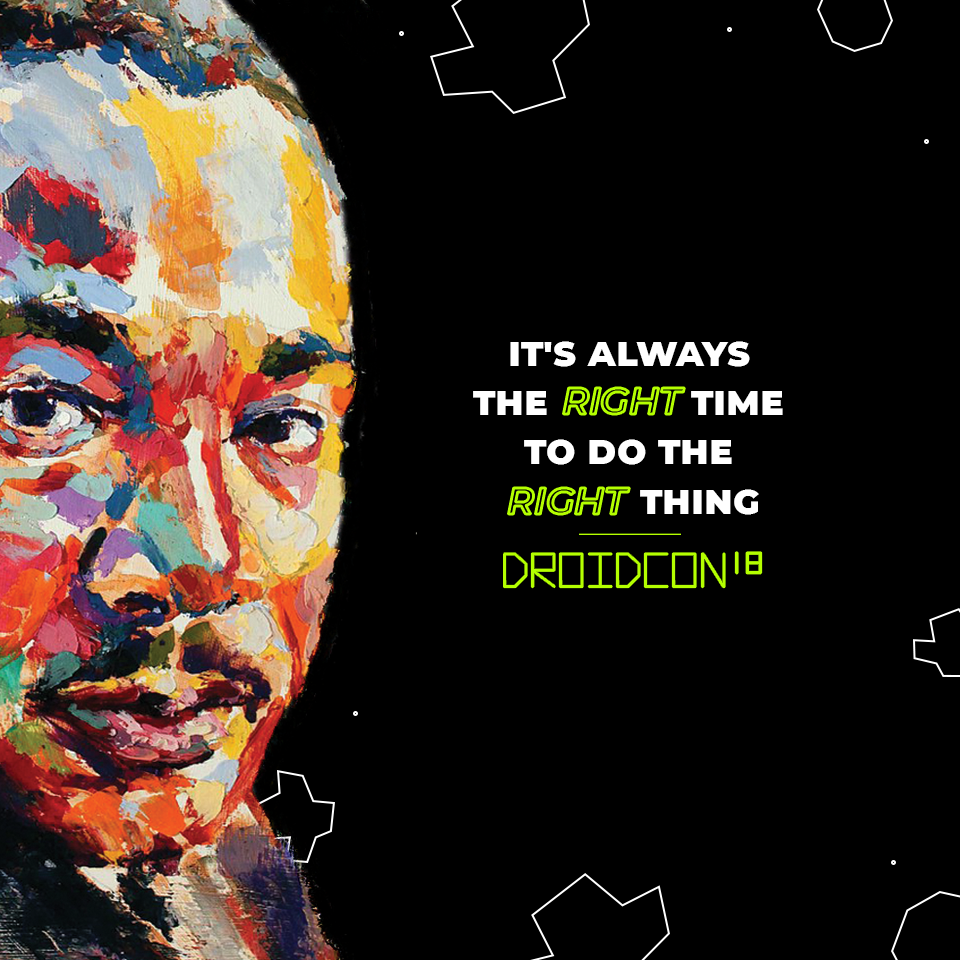
<style>
.page{position:relative;width:960px;height:960px;background:#000000}
.page>*{position:absolute;margin:0}
.t1{font:41.1px "Montserrat-ExtraBold";color:#ffffff;font-variant:small-caps}
.t2{font:37px "Montserrat-SemiBoldItalic"}
</style>
<div class="page">
<p class="t1" style="left:473px;top:341px;width:310px;height:174px;text-align:center">it's always <br>the            time <br>to do the <br>           thing</p>
<p class="t2" style="left:563px;top:388px;width:122px;height:26px">RIGHT</p>
<p class="t2" style="left:508px;top:488px;width:122px;height:26px">RIGHT</p>
</div>
